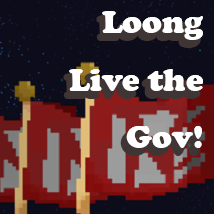
<style>
.page{position:relative;width:214px;height:214px;background:#0c0c1a}
.page>*{position:absolute;margin:0}
.t1{font:32.9px "CooperBlack";color:#ffffff}
</style>
<div class="page">
<p class="t1" style="left:69px;top:11px;width:134px;height:137px;text-align:right">Loong<br>Live the<br>Gov!</p>
</div>
